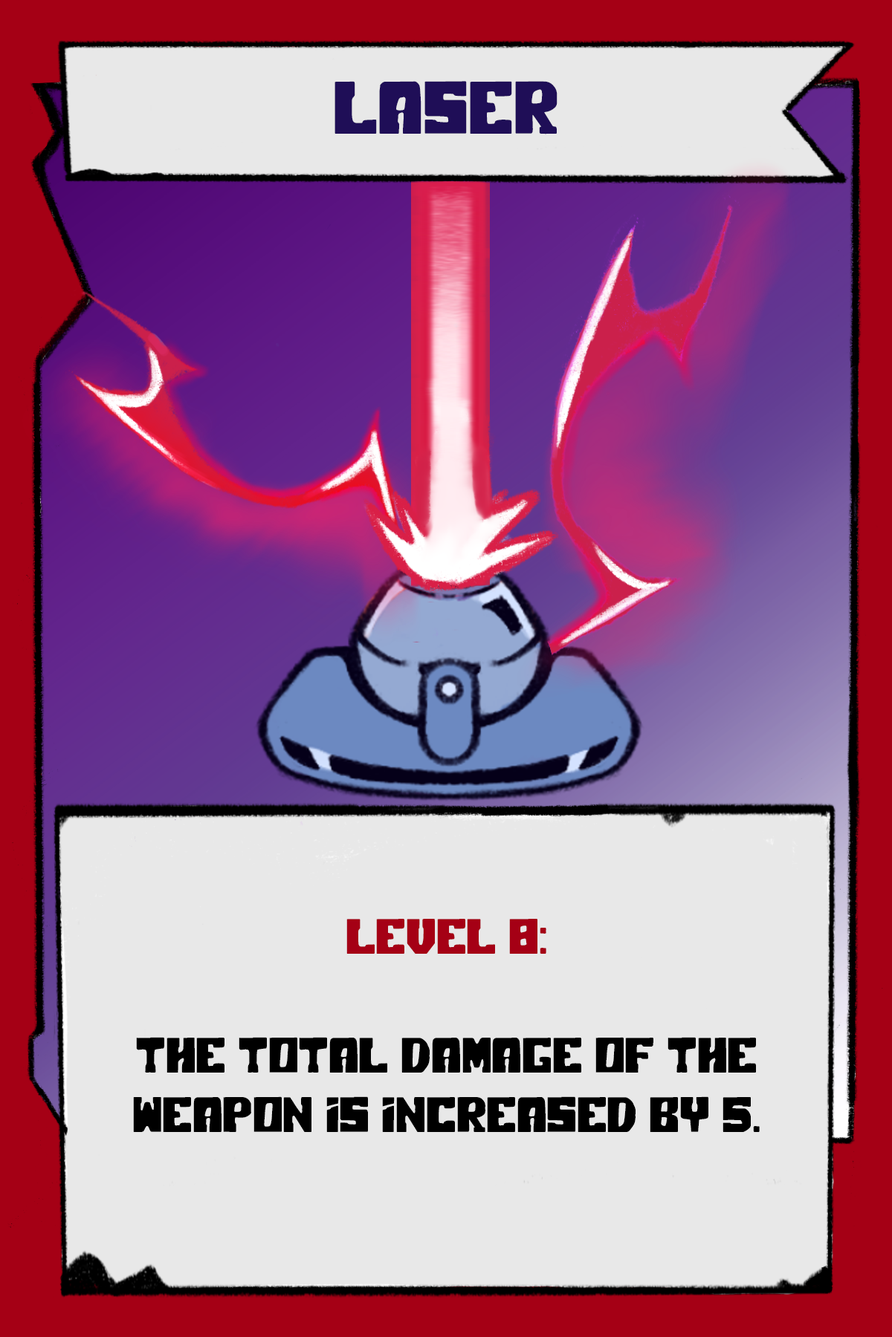
<style>
.page{position:relative;width:892px;height:1337px;background:#e8e8e8}
.page>*{position:absolute;margin:0}
.t1{font:74.3px "PolarPress";color:#1f0e57}
.t2{font:49.5px "PolarPress";color:#000000}
.t3{font:49.5px "PolarPress";color:#a50015}
</style>
<div class="page">
<p class="t1" style="left:334px;top:81px;width:223px;height:53px">LASER</p>
<p class="t2" style="left:133px;top:919px;width:626px;height:213px;text-align:center"><span class="t3">LEVEL 8:<br><br></span>The total damage of the weapon is increased by 5.</p>
</div>
